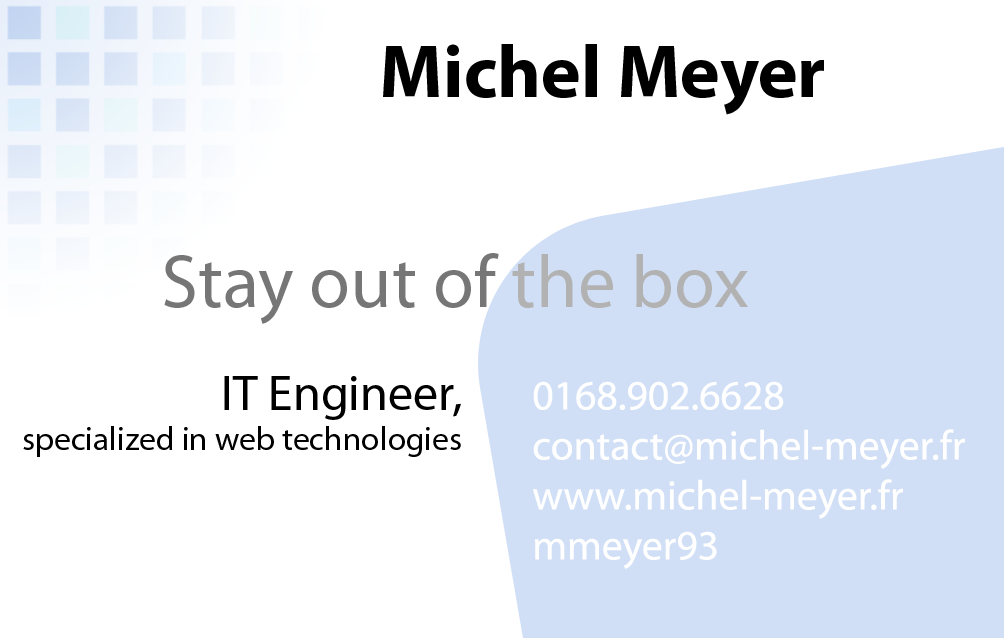
<style>
.page{position:relative;width:1004px;height:638px;background:#ffffff}
.page>*{position:absolute;margin:0}
.t1{font:75px "MyriadPro-Bold";color:#000000}
.t2{font:75px "MyriadPro-Regular";color:#767676}
.t3{font:75px "MyriadPro-Regular";color:#b3b2b2}
.t4{font:33.3px "MyriadPro-Regular";color:#000000}
.t5{font:50px "MyriadPro-Regular";color:#000000}
.t6{font:41.7px "MyriadPro-Regular";color:#ffffff}
</style>
<div class="page">
<p class="t1" style="left:383px;top:44px;width:441px;height:71px">Michel Meyer</p>
<p class="t2" style="left:164px;top:253px;width:584px;height:71px">Stay out of <span class="t3">the box</span></p>
<p class="t4" style="left:23px;top:376px;width:438px;height:81px;text-align:right"><span class="t5">IT Engineer,<br></span>specialized in web technologies</p>
<p class="t6" style="left:533px;top:381px;width:432px;height:188px">0168.902.6628<br>contact@michel-meyer.fr<br>www.michel-meyer.fr<br>mmeyer93</p>
</div>
